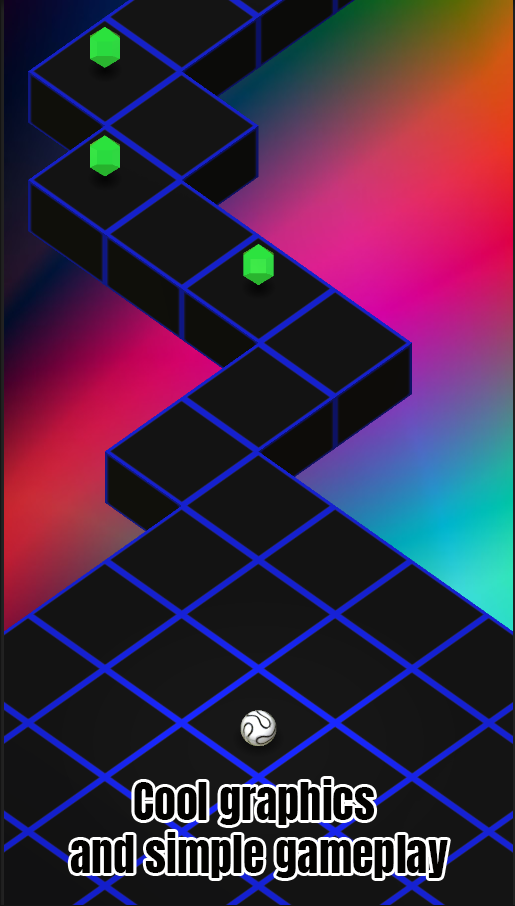
<style>
.page{position:relative;width:515px;height:906px}
.page>*{position:absolute;margin:0}
.t1{font:44px "Anton-Regular";color:#030200}
</style>
<div class="page">
<p class="t1" style="left:70px;top:779px;width:378px;height:99px;text-align:center">Cool graphics <br>and simple gameplay</p>
</div>
